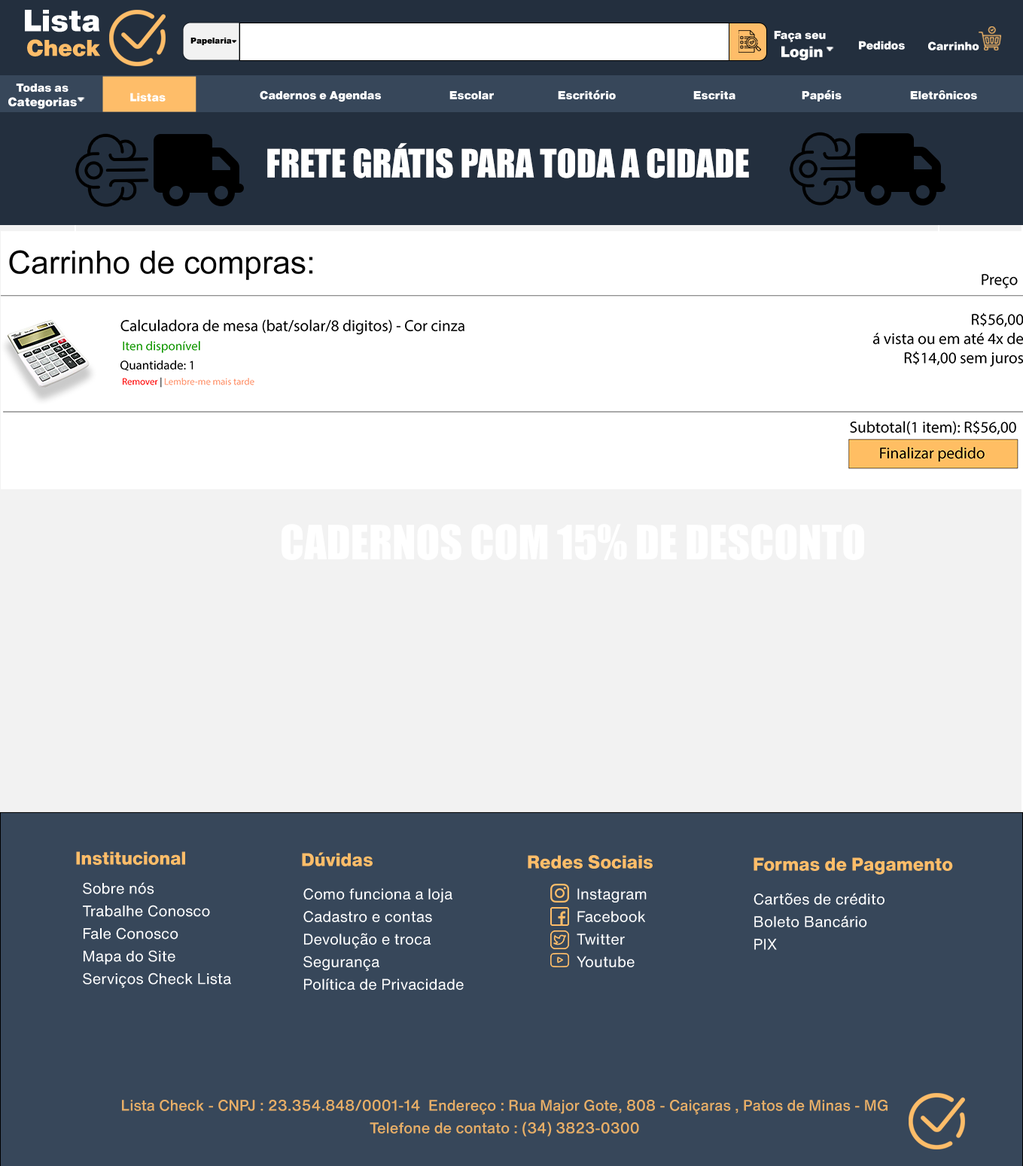
<style>
.page{position:relative;width:1023px;height:1166px;background:#37475a}
.page>*{position:absolute;margin:0}
.t1{font:30.1px "HelveticaNowText-Black";color:#ffffff}
.t2{font:22.6px "HelveticaNowText-Black";color:#febd69}
.t3{font:8.3px "HelveticaNowText-Black";color:#000000}
.t4{font:11.3px "HelveticaNowText-Black";color:#ffffff}
.t5{font:15.1px "HelveticaNowText-Black";color:#ffffff}
.t6{font:12px "HelveticaNowText-Black";color:#ffffff}
.t7{font:36.1px "Impact";color:#ffffff}
.t8{font:43.7px "Impact";color:#ffffff}
.t9{font:18.1px "HelveticaNowText-ExtraBold";color:#febd69}
.t10{font:15.1px/22.6px "HelveticaNowText-Regular";color:#ffffff}
.t11{font:15.1px/22.6px "HelveticaNowText-Medium";color:#e7ae67}
</style>
<div class="page">
<p class="t1" style="left:25px;top:10px;width:75px;height:22px">Lista</p>
<p class="t2" style="left:27px;top:39px;width:73px;height:17px">Check</p>
<p class="t3" style="left:190px;top:38px;width:42px;height:7px">Papelaria</p>
<p class="t4" style="left:774px;top:31px;width:52px;height:29px;text-align:center">Faça seu<br><span class="t5"> Login</span></p>
<p class="t4" style="left:859px;top:41px;width:46px;height:9px">Pedidos</p>
<p class="t4" style="left:928px;top:41px;width:51px;height:9px">Carrinho</p>
<p class="t6" style="left:8px;top:84px;width:69px;height:25px;text-align:center"><span class="t4">Todas as<br></span>Categorias</p>
<p class="t4" style="left:260px;top:90px;width:717px;height:12px">Cadernos e Agendas   Escolar   Escritório   Escrita   Papéis   Eletrônicos</p>
<p class="t4" style="left:130px;top:93px;width:36px;height:9px">Listas</p>
<p class="t7" style="left:267px;top:143px;width:482px;height:35px">FRETE GRÁTIS PARA TODA A CIDADE</p>
<p class="t8" style="left:281px;top:524px;width:583px;height:36px">CADERNOS COM 15% DE DESCONTO</p>
<p class="t9" style="left:76px;top:851px;width:109px;height:14px">Institucional</p>
<p class="t9" style="left:302px;top:852px;width:71px;height:14px">Dúvidas</p>
<p class="t9" style="left:528px;top:855px;width:125px;height:14px">Redes Sociais</p>
<p class="t9" style="left:753px;top:857px;width:200px;height:18px">Formas de Pagamento</p>
<p class="t10" style="left:83px;top:882px;width:148px;height:106px;text-align:justify">Sobre nós<br>Trabalhe Conosco<br>Fale Conosco<br>Mapa do Site<br>Serviços Check Lista</p>
<p class="t10" style="left:303px;top:888px;width:161px;height:102px;text-align:justify">Como funciona a loja<br>Cadastro e contas<br>Devolução e troca<br>Segurança<br>Política de Privacidade</p>
<p class="t10" style="left:577px;top:888px;width:70px;height:79px;text-align:justify">Instagram<br>Facebook<br>Twitter<br>Youtube</p>
<p class="t10" style="left:753px;top:893px;width:131px;height:57px;text-align:justify">Cartões de crédito<br>Boleto Bancário<br>PIX</p>
<p class="t11" style="left:122px;top:1100px;width:765px;height:36px;text-align:center">Lista Check - CNPJ : 23.354.848/0001-14  Endereço : Rua Major Gote, 808 - Caiçaras , Patos de Minas - MG<br>Telefone de contato : (34) 3823-0300</p>
</div>
